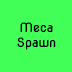
<style>
.page{position:relative;width:72px;height:72px;background:#42ff58}
.page>*{position:absolute;margin:0}
.t1{font:12.5px "NovaFlat";color:#000000}
</style>
<div class="page">
<p class="t1" style="left:17px;top:22px;width:39px;height:28px;text-align:center">Meca<br>Spawn</p>
</div>
